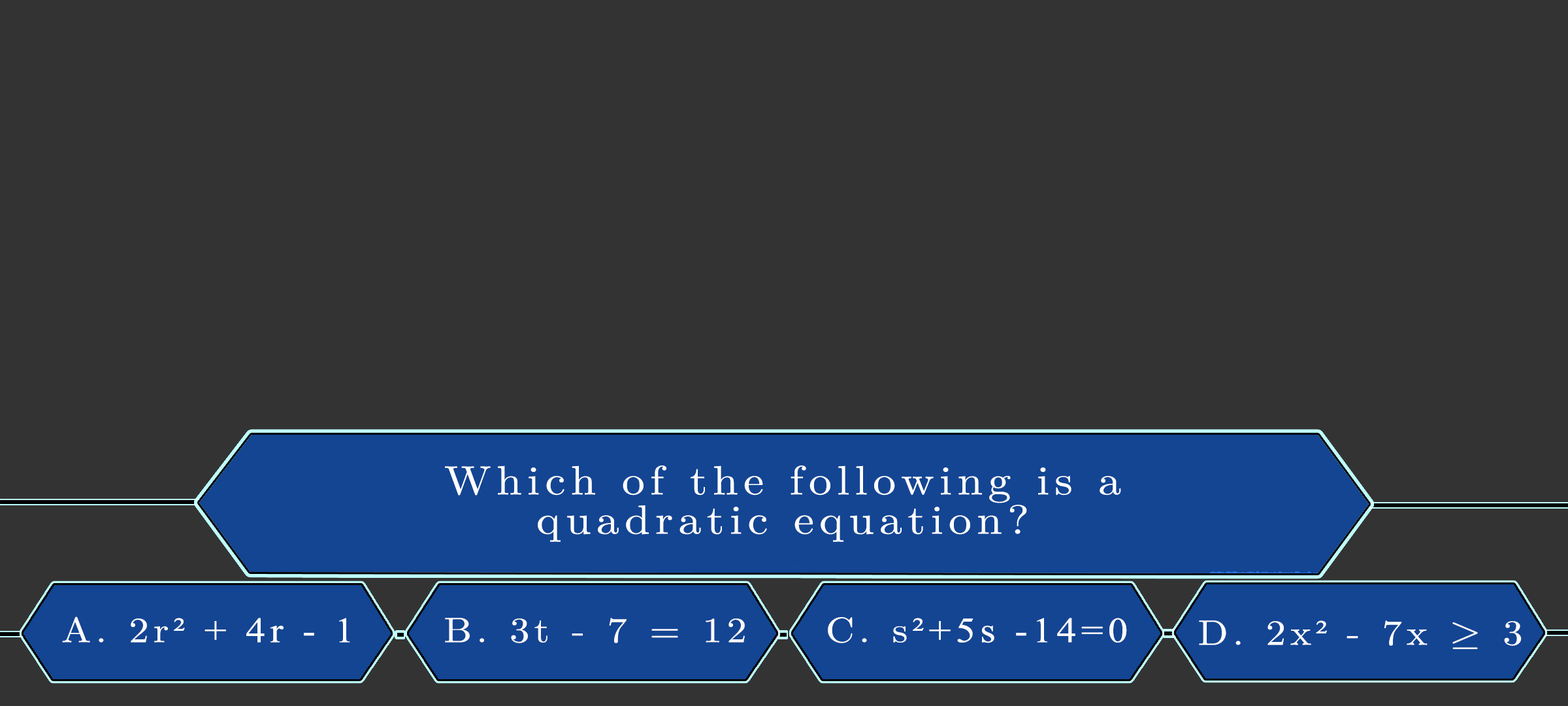
<style>
.page{position:relative;width:1568px;height:706px;background:#333333}
.page>*{position:absolute;margin:0}
.t1{font:40.9px/39.3px "LatinModernMath-Regular";letter-spacing:0.115em;color:#ffffff;scale:1.12 1}
.t2{font:35.4px "TimesNewRomanPSMT";letter-spacing:0.115em;color:#fdfdfd;scale:1.12 1}
.t3{font:35.4px "LatinModernMath-Regular";letter-spacing:0.115em;color:#fdfdfd;scale:1.12 1}
.t4{font:35.4px "LatinModernMath-Regular";letter-spacing:0.115em;color:#fcf9f9;scale:1.12 1}
.t5{font:35.4px "LatinModernMath-Regular";letter-spacing:0.115em;color:#fcf9f9;text-transform:uppercase;scale:1.12 1}
.t6{font:35.4px "TimesNewRomanPSMT";letter-spacing:0.115em;color:#fdfcfc;scale:1.12 1}
.t7{font:35.4px "LatinModernMath-Regular";letter-spacing:0.115em;color:#fdfcfc;text-transform:uppercase;scale:1.12 1}
.t8{font:35.4px "LatinModernMath-Regular";letter-spacing:0.115em;color:#fdfcfc;scale:1.12 1}
.t9{font:35.4px "LatinModernMath-Regular";letter-spacing:0.115em;color:#fffdfd;scale:1.12 1}
.t10{font:35.4px "LatinModernMath-Regular";letter-spacing:0.115em;color:#fffdfd;text-transform:uppercase;scale:1.12 1}
.t11{font:35.4px "TimesNewRomanPSMT";letter-spacing:0.115em;color:#fffdfd;scale:1.12 1}
</style>
<div class="page">
<p class="t1" style="left:445px;top:465px;width:676px;height:77px;text-align:center">Which of the following is a<br>quadratic equation?</p>
<p class="t2" style="left:62px;top:616px;width:288px;height:26px"><span class="t3">A. 2r</span>² + 4r - 1</p>
<p class="t4" style="left:445px;top:617px;width:300px;height:26px"><span class="t5">B. </span>3t - 7 = 12</p>
<p class="t6" style="left:828px;top:617px;width:299px;height:26px"><span class="t7">C. </span><span class="t8">s</span>²+5s -14=0</p>
<p class="t9" style="left:1199px;top:620px;width:323px;height:29px"><span class="t10">D. </span>2x<span class="t11">² </span>- 7x ≥ 3</p>
</div>
